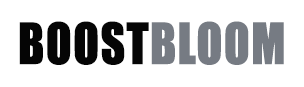
<style>
.page{position:relative;width:304px;height:87px;background:#ffffff}
.page>*{position:absolute;margin:0}
.t1{font:52.5px "Impact";color:#050505;font-weight:bold;scale:0.91 1}
.t2{font:52.5px "Impact";color:#767b83;font-weight:bold;scale:0.91 1}
</style>
<div class="page">
<p class="t1" style="left:19px;top:21px;width:265px;height:44px">BOOST<span class="t2">BLOOM</span></p>
</div>
